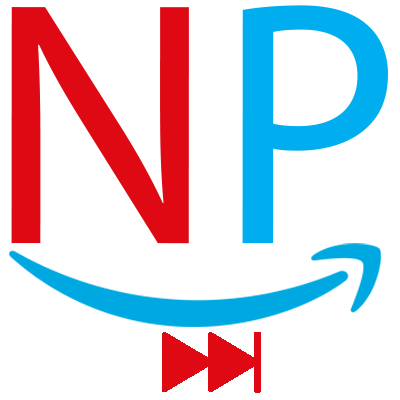
<style>
.page{position:relative;width:400px;height:400px;background:#ffffff}
.page>*{position:absolute;margin:0}
.t1{font:350px "MyriadPro-Regular";color:#de0913}
.t2{font:350px "MyriadPro-Regular";color:#00aeef}
</style>
<div class="page">
<p class="t1" style="left:11px;top:5px;width:377px;height:239px">N<span class="t2">P</span></p>
</div>
